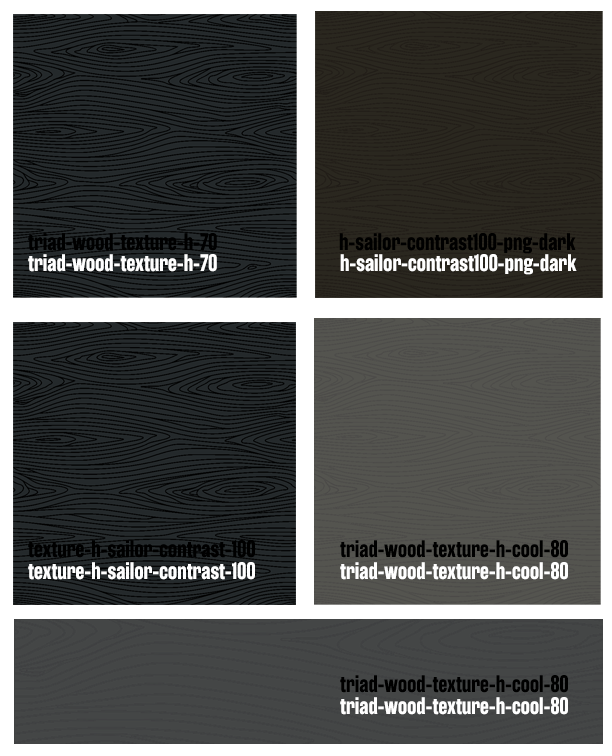
<style>
.page{position:relative;width:612px;height:756px}
.page>*{position:absolute;margin:0}
.t1{font:24px "RamaGothicE-Bold";color:#000000;scale:0.96 1}
.t2{font:24px "RamaGothicE-Bold";color:#ffffff;scale:0.96 1}
</style>
<div class="page">
<p class="t1" style="left:28px;top:233px;width:189px;height:18px">triad-wood-texture-h-70</p>
<p class="t1" style="left:339px;top:233px;width:237px;height:21px">h-sailor-contrast100-png-dark</p>
<p class="t2" style="left:28px;top:254px;width:189px;height:18px">triad-wood-texture-h-70</p>
<p class="t2" style="left:340px;top:254px;width:237px;height:21px">h-sailor-contrast100-png-dark</p>
<p class="t1" style="left:28px;top:540px;width:227px;height:18px">texture-h-sailor-contrast-100</p>
<p class="t1" style="left:340px;top:540px;width:228px;height:18px">triad-wood-texture-h-cool-80</p>
<p class="t2" style="left:28px;top:562px;width:227px;height:18px">texture-h-sailor-contrast-100</p>
<p class="t2" style="left:340px;top:562px;width:228px;height:18px">triad-wood-texture-h-cool-80</p>
<p class="t1" style="left:340px;top:675px;width:228px;height:18px">triad-wood-texture-h-cool-80</p>
<p class="t2" style="left:340px;top:697px;width:228px;height:18px">triad-wood-texture-h-cool-80</p>
</div>
